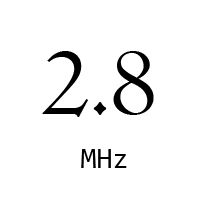
<style>
.page{position:relative;width:200px;height:200px;background:#ffffff}
.page>*{position:absolute;margin:0}
.t1{font:100px "Centaur";color:#000000}
.t2{font:29.2px "Consolas";color:#000000}
</style>
<div class="page">
<p class="t1" style="left:42px;top:51px;width:112px;height:66px">2.8</p>
<p class="t2" style="left:81px;top:149px;width:46px;height:19px">MHz</p>
</div>
